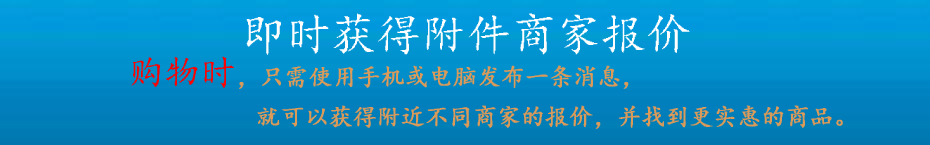
<style>
.page{position:relative;width:930px;height:145px}
.page>*{position:absolute;margin:0}
.t1{font:45px "¿¬Ìå";color:#ffffff}
.t2{font:24px "¿¬Ìå";color:#da9a5a;font-weight:bold}
.t3{font:36px "¿¬Ìå";color:#fb0303}
</style>
<div class="page">
<p class="t1" style="left:246px;top:13px;width:444px;height:42px">即时获得附件商家报价</p>
<p class="t2" style="left:131px;top:56px;width:498px;height:33px"><span class="t3">购物时</span>，只需使用手机或电脑发布一条消息，</p>
<p class="t2" style="left:257px;top:105px;width:586px;height:24px">就可以获得附近不同商家的报价，并找到更实惠的商品。</p>
</div>
